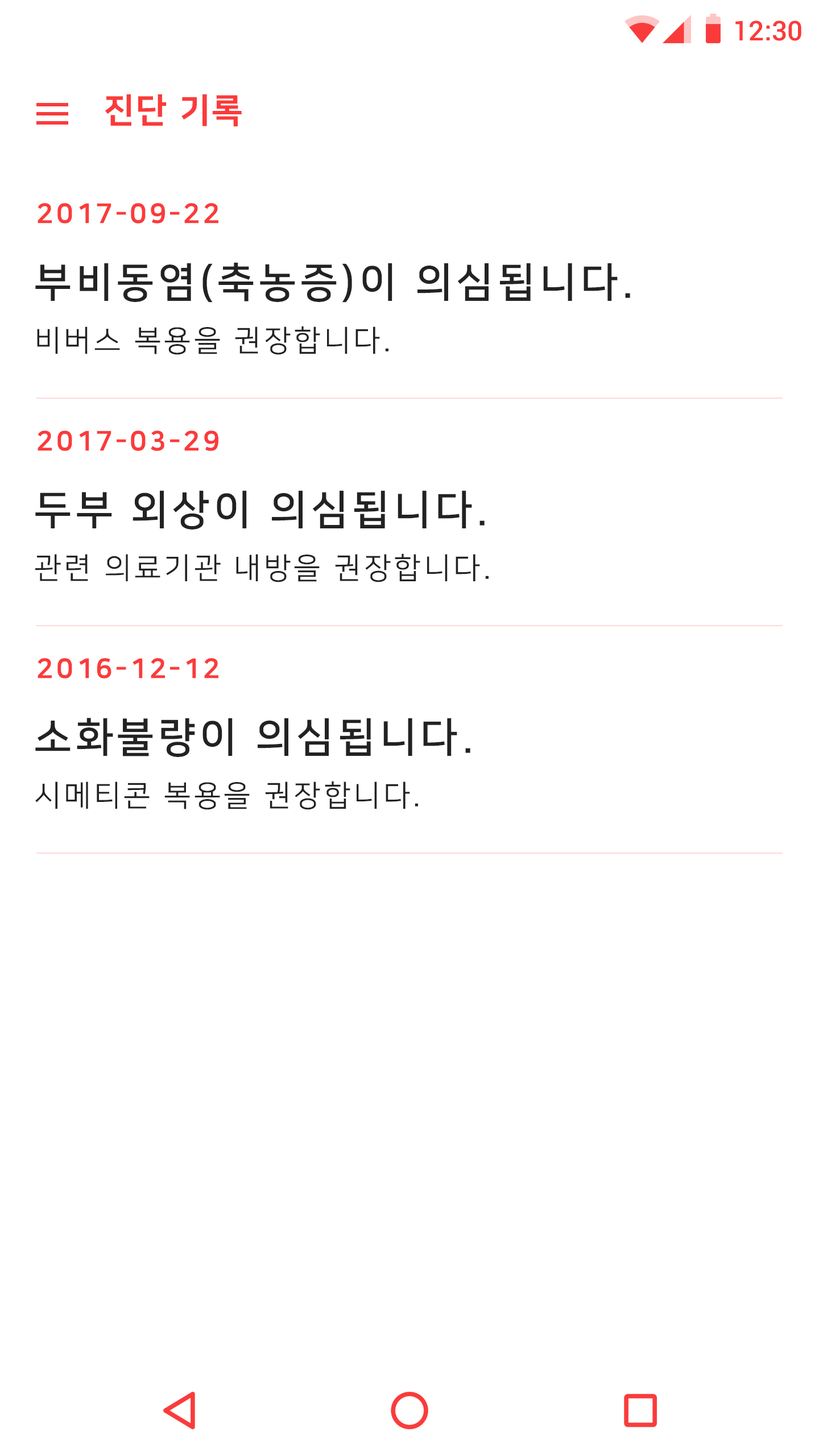
<style>
.page{position:relative;width:819px;height:1456px;background:#ffffff}
.page>*{position:absolute;margin:0}
.t1{font:27.3px "Roboto-Medium";color:#fa3b3b}
.t2{font:34.1px "NanumSquareEB";letter-spacing:0.05em;color:#fa3b3b}
.t3{font:27.3px "NanumSquareEB";letter-spacing:0.1em;color:#fa3b3b}
.t4{font:40.9px "NanumSquareB";letter-spacing:0.1em;color:#222222}
.t5{font:29.6px "NanumSquareR";letter-spacing:0.1em;color:#222222}
</style>
<div class="page">
<p class="t1" style="left:735px;top:20px;width:66px;height:21px">12:30</p>
<p class="t2" style="left:105px;top:94px;width:137px;height:33px">진단 기록</p>
<p class="t3" style="left:38px;top:203px;width:180px;height:21px">2017-09-22</p>
<p class="t4" style="left:35px;top:262px;width:595px;height:41px">부비동염(축농증)이 의심됩니다.</p>
<p class="t5" style="left:37px;top:326px;width:351px;height:29px">비버스 복용을 권장합니다.</p>
<p class="t3" style="left:38px;top:431px;width:180px;height:20px">2017-03-29</p>
<p class="t4" style="left:35px;top:490px;width:450px;height:39px">두부 외상이 의심됩니다.</p>
<p class="t5" style="left:35px;top:553px;width:454px;height:29px">관련 의료기관 내방을 권장합니다.</p>
<p class="t3" style="left:38px;top:658px;width:180px;height:21px">2016-12-12</p>
<p class="t4" style="left:35px;top:718px;width:435px;height:39px">소화불량이 의심됩니다.</p>
<p class="t5" style="left:35px;top:781px;width:383px;height:29px">시메티콘 복용을 권장합니다.</p>
</div>
